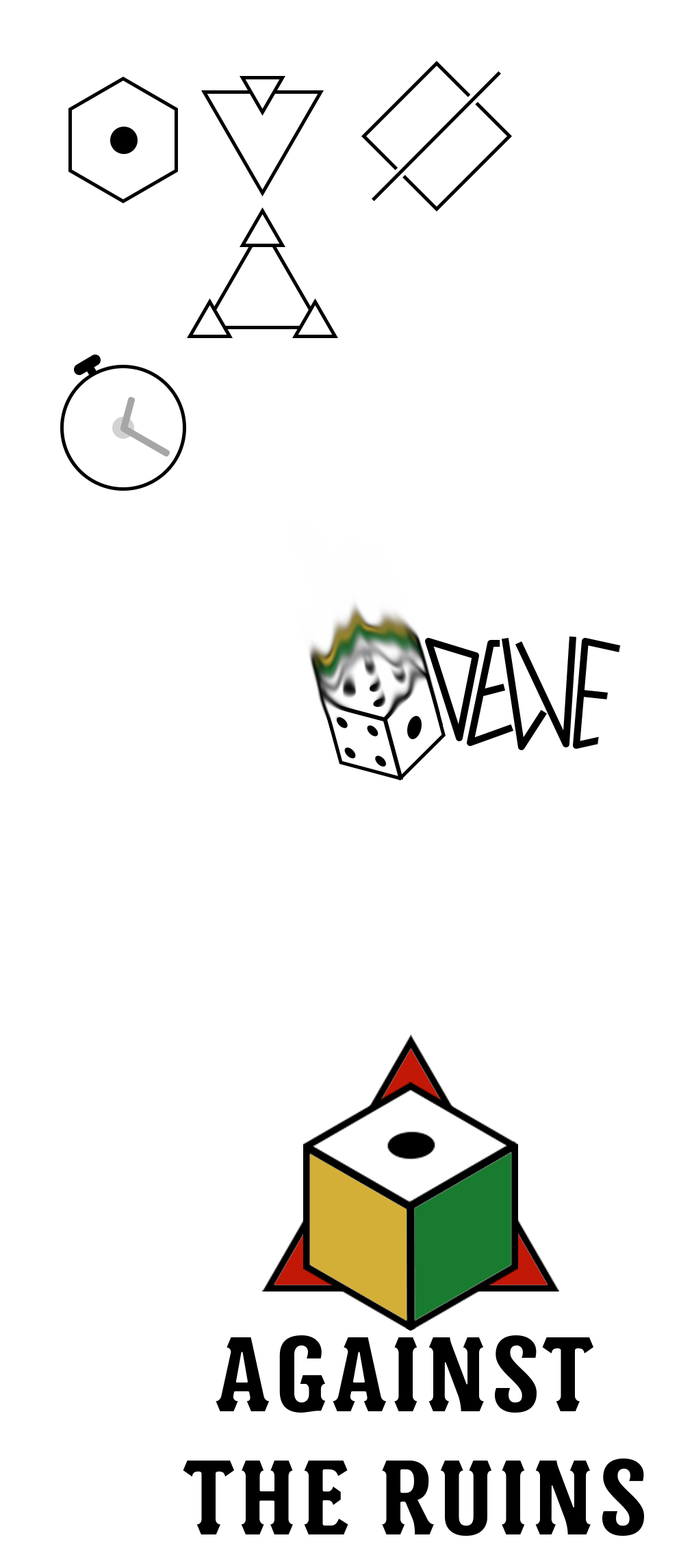
<style>
.page{position:relative;width:681px;height:1568px;background:#ffffff}
.page>*{position:absolute;margin:0}
.t1{font:102.7px "BatakCondensedITCStd-Bold";letter-spacing:0.05em;color:#000000}
</style>
<div class="page">
<p class="t1" style="left:183px;top:1335px;width:461px;height:201px;text-align:center">AGAINST <br>THE RUINS</p>
</div>
